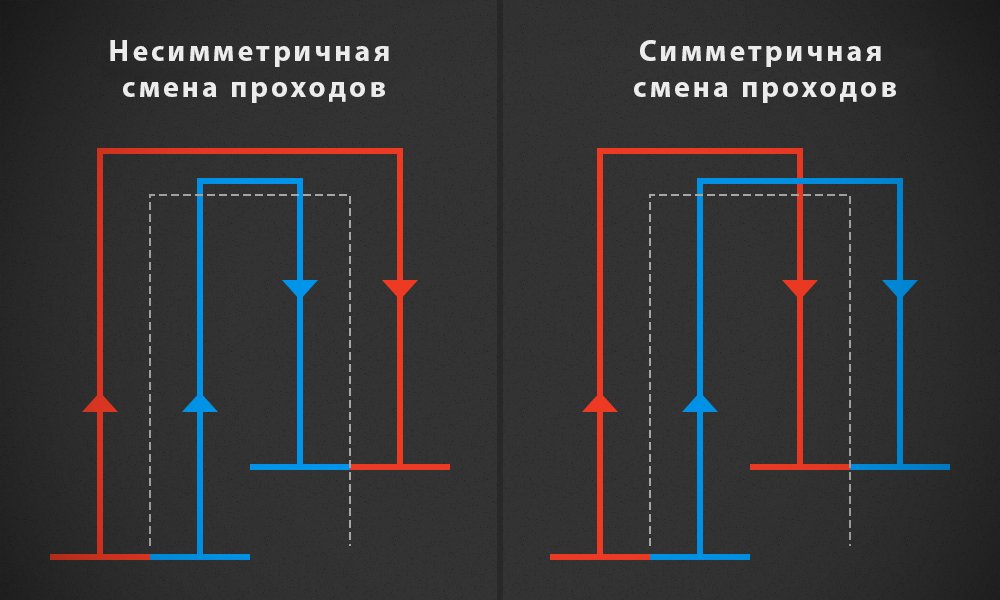
<style>
.page{position:relative;width:1000px;height:600px;background:#333333}
.page>*{position:absolute;margin:0}
.t1{font:30px "MyriadPro-Bold";letter-spacing:0.1em;color:#ececec}
</style>
<div class="page">
<p class="t1" style="left:110px;top:40px;width:279px;height:63px;text-align:center">Несимметричная<br> смена проходов</p>
<p class="t1" style="left:634px;top:40px;width:262px;height:63px;text-align:center">Симметричная<br> смена проходов</p>
</div>
